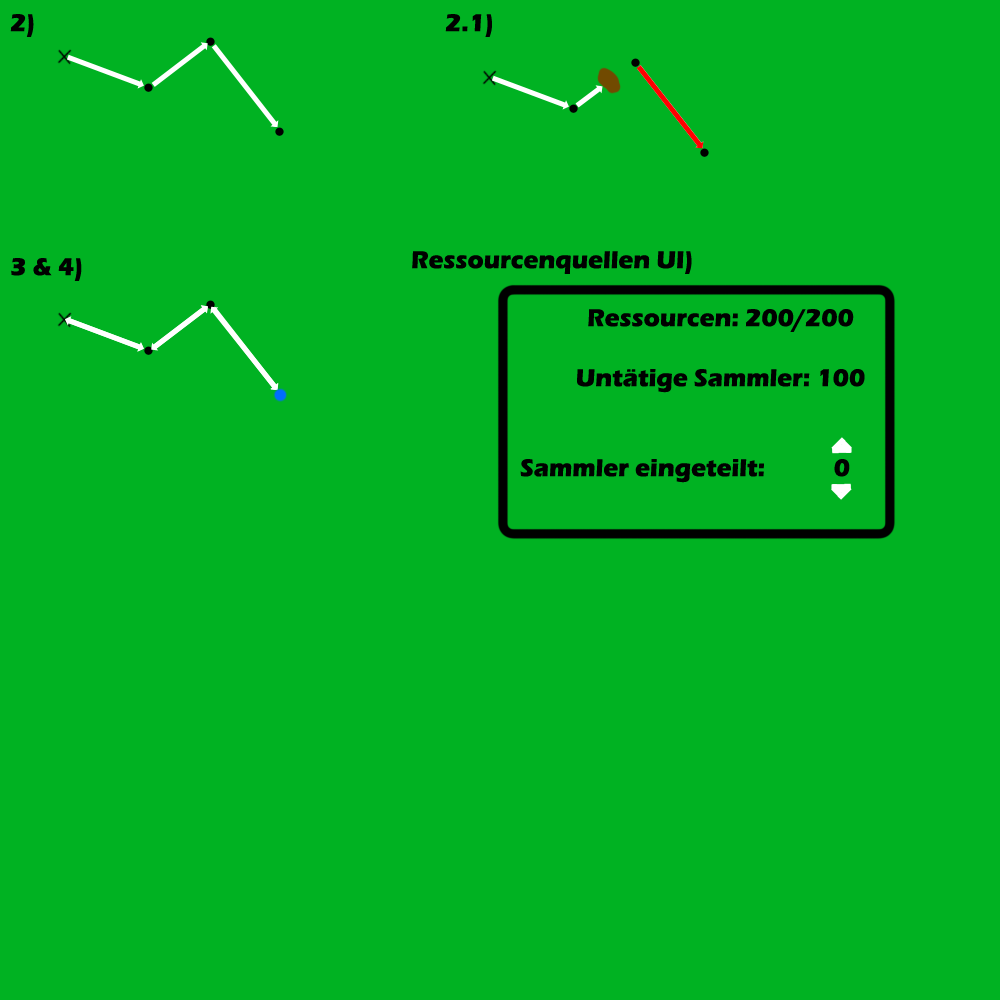
<style>
.page{position:relative;width:1000px;height:1000px;background:#00b222}
.page>*{position:absolute;margin:0}
.t1{font:25px "ErasITC-Bold";color:#000000}
</style>
<div class="page">
<p class="t1" style="left:10px;top:14px;width:24px;height:23px">2)</p>
<p class="t1" style="left:445px;top:14px;width:47px;height:23px">2.1)</p>
<p class="t1" style="left:412px;top:251px;width:280px;height:23px">Ressourcenquellen UI)</p>
<p class="t1" style="left:11px;top:258px;width:71px;height:23px">3 &amp; 4)</p>
<p class="t1" style="left:520px;top:309px;width:345px;height:174px;text-align:center">Ressourcen: 200/200<br><br>Untätige Sammler: 100<br><br><br>Sammler eingeteilt:           0</p>
</div>
